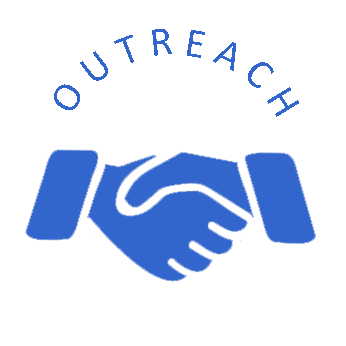
<style>
.page{position:relative;width:346px;height:346px;background:#ffffff}
.page>*{position:absolute;margin:0}
.t1{font:41.4px "Calibri";color:#3366cc}
</style>
<div class="page">
<p class="t1" style="left:54px;top:29px;width:245px;height:88px;rotate:-1deg">O U T R E A C H</p>
</div>
